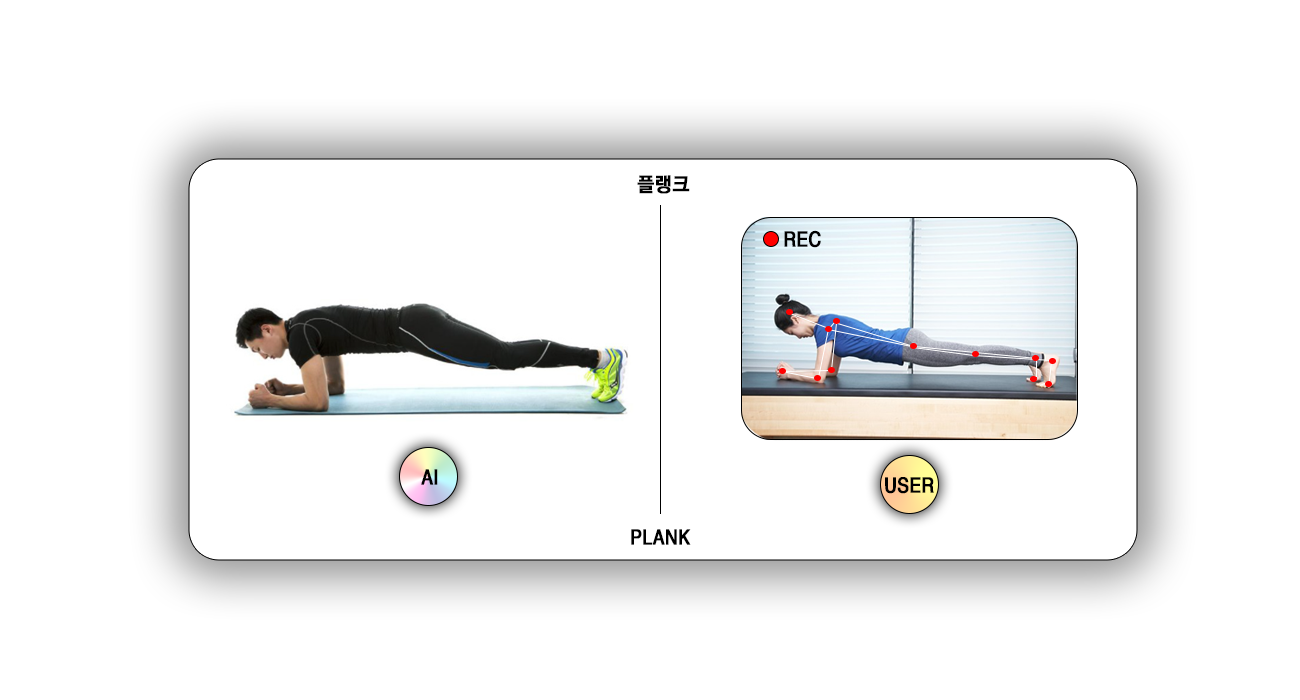
<style>
.page{position:relative;width:1300px;height:700px;background:#ffffff}
.page>*{position:absolute;margin:0}
.t1{font:20px "YGO550";color:#000000;font-weight:bold;scale:0.95 1}
</style>
<div class="page">
<p class="t1" style="left:637px;top:175px;width:53px;height:19px">플랭크</p>
<p class="t1" style="left:784px;top:230px;width:37px;height:18px">REC</p>
<p class="t1" style="left:421px;top:469px;width:17px;height:16px">AI</p>
<p class="t1" style="left:885px;top:477px;width:49px;height:17px">USER</p>
<p class="t1" style="left:631px;top:529px;width:60px;height:16px">PLANK</p>
</div>
